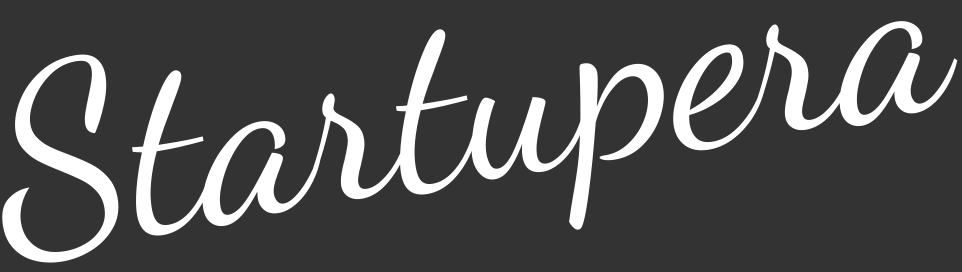
<style>
.page{position:relative;width:962px;height:272px;background:#333333}
.page>*{position:absolute;margin:0}
.t1{font:250px "DancingScript-Regular";color:#ffffff}
</style>
<div class="page">
<p class="t1" style="left:2px;top:21px;width:956px;height:242px;rotate:-9deg">Startupera</p>
</div>
